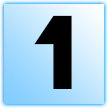
<style>
.page{position:relative;width:108px;height:108px}
.page>*{position:absolute;margin:0}
.t1{font:150px "ROBOTECHGP";color:#000000}
</style>
<div class="page">
<p class="t1" style="left:34px;top:15px;width:38px;height:74px">1</p>
</div>
